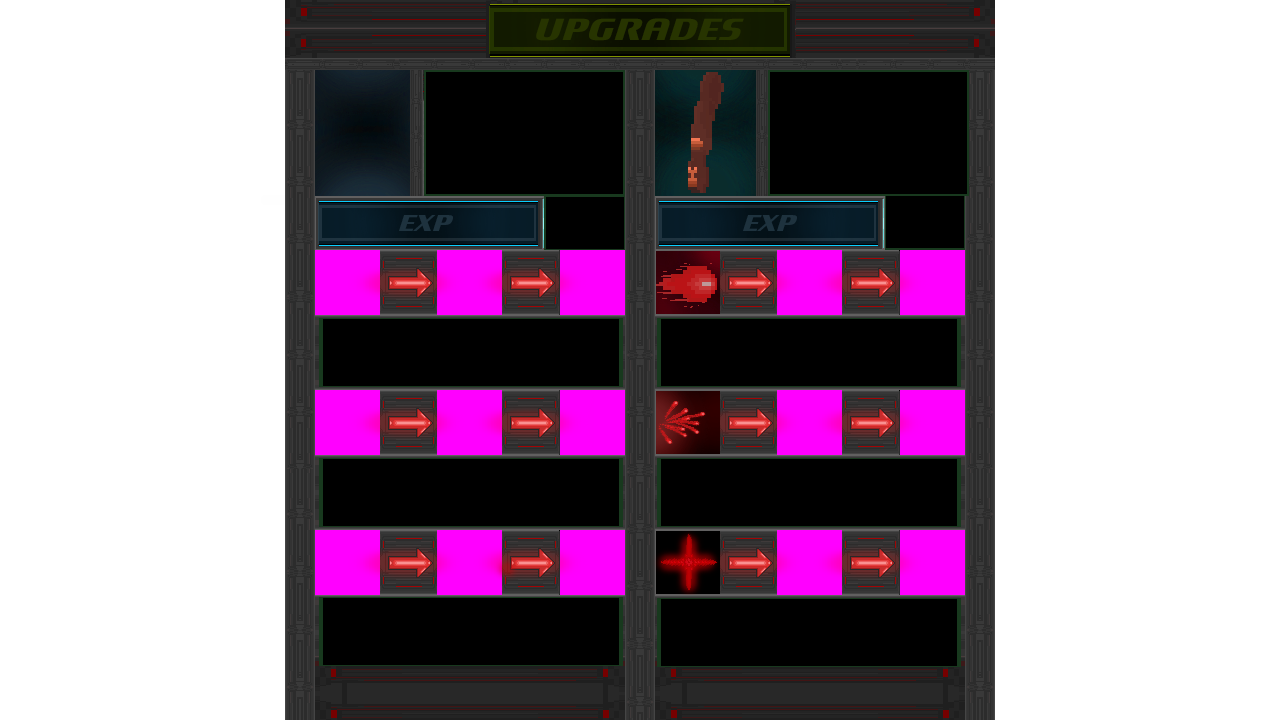
<style>
.page{position:relative;width:1280px;height:720px;background:#ffffff}
.page>*{position:absolute;margin:0}
.t1{font:48px "Motorwerk";color:#273400}
.t2{font:36px "Motorwerk";color:#1e323e}
</style>
<div class="page">
<p class="t1" style="left:536px;top:18px;width:208px;height:23px">Upgrades</p>
<p class="t2" style="left:399px;top:215px;width:54px;height:16px">EXP</p>
<p class="t2" style="left:743px;top:215px;width:54px;height:16px">EXP</p>
</div>
